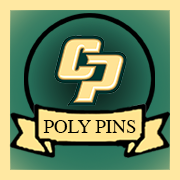
<style>
.page{position:relative;width:180px;height:180px;background:#ffe8a2}
.page>*{position:absolute;margin:0}
.t1{font:19px "Times-Roman";color:#000000}
</style>
<div class="page">
<p class="t1" style="left:43px;top:120px;width:93px;height:13px">POLY PINS</p>
</div>
